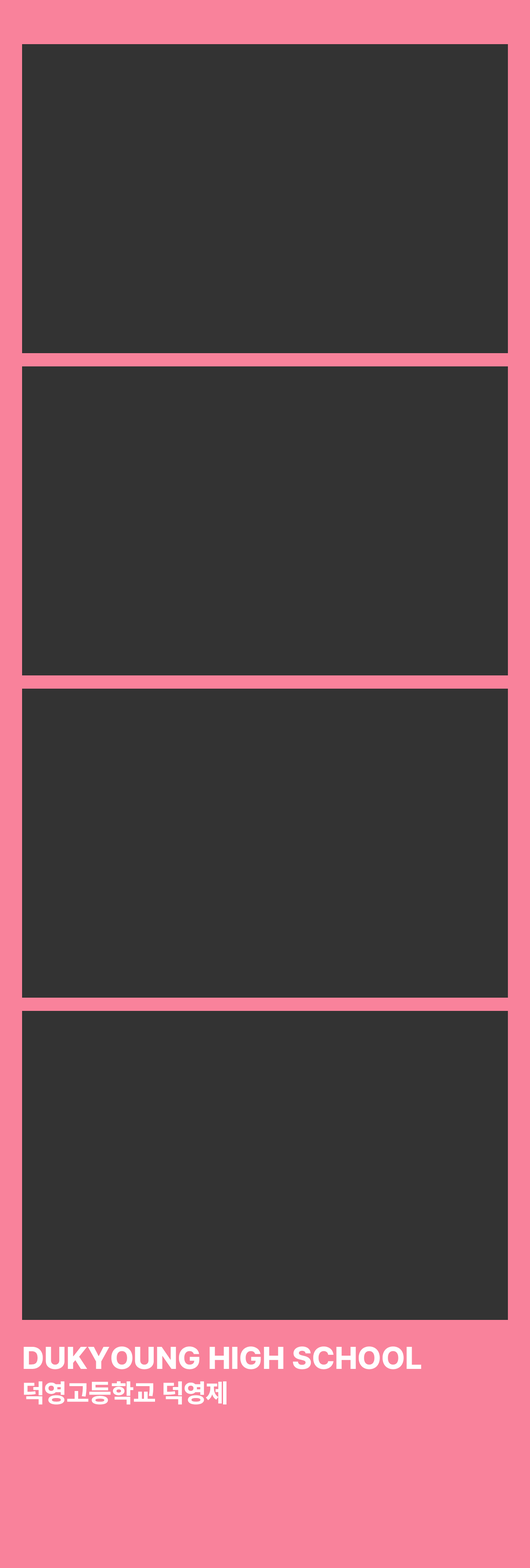
<style>
.page{position:relative;width:530px;height:1568px;background:#333333}
.page>*{position:absolute;margin:0}
.t1{font:31.3px "Pretendard-ExtraBold";color:#ffffff}
.t2{font:25.8px "Pretendard-ExtraBold";color:#ffffff}
</style>
<div class="page">
<p class="t1" style="left:23px;top:1346px;width:398px;height:23px">DUKYOUNG HIGH SCHOOL</p>
<p class="t2" style="left:24px;top:1381px;width:202px;height:24px">덕영고등학교 덕영제</p>
</div>
